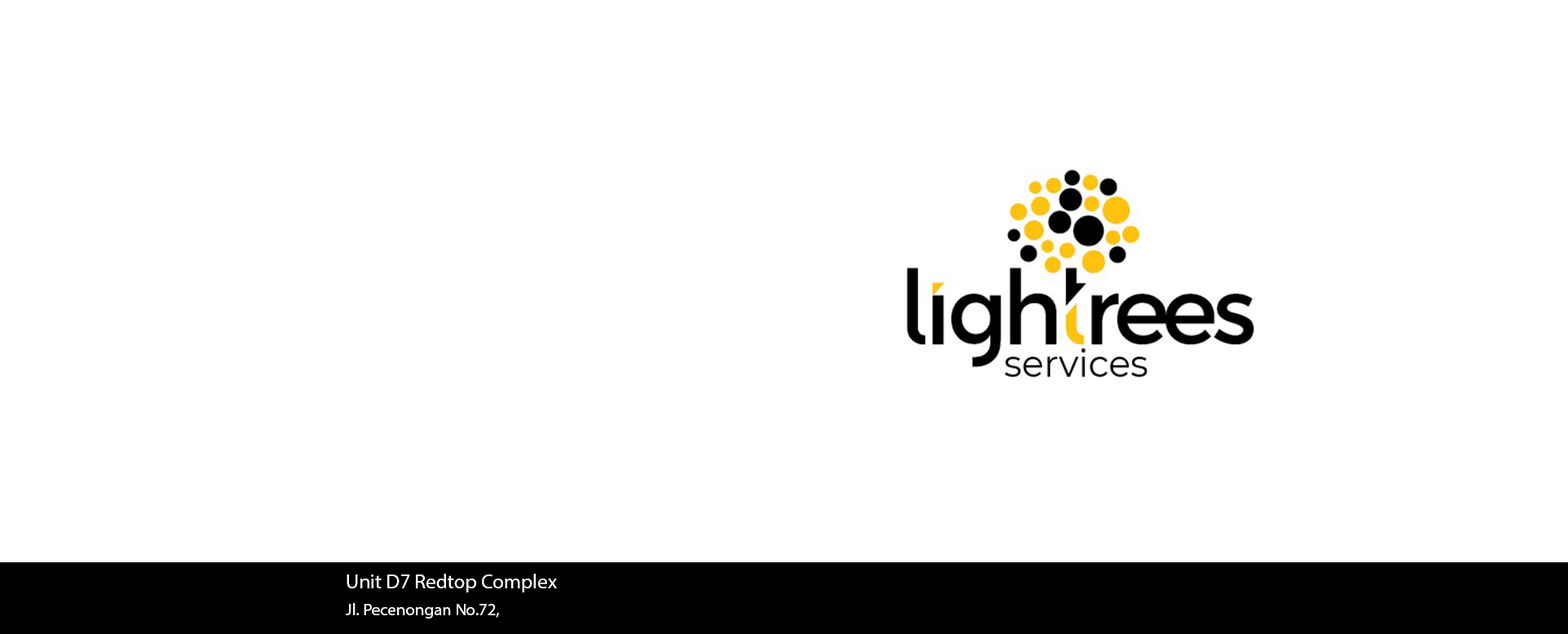
<style>
.page{position:relative;width:1568px;height:634px;background:#ffffff}
.page>*{position:absolute;margin:0}
.t1{font:20.4px "MyriadPro-Regular";color:#ffffff}
.t2{font:17px "MyriadPro-Regular";color:#ffffff}
</style>
<div class="page">
<p class="t1" style="left:347px;top:574px;width:210px;height:19px">Unit D7 Redtop Complex</p>
<p class="t2" style="left:346px;top:603px;width:153px;height:16px">Jl. Pecenongan No.72,</p>
</div>
